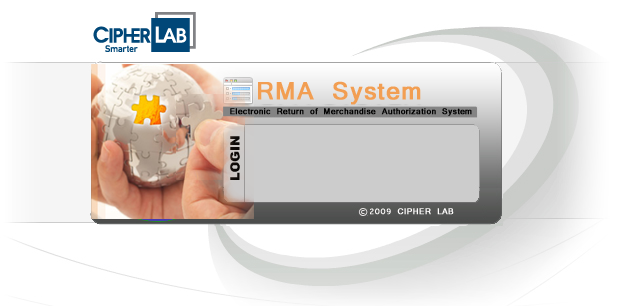
<style>
.page{position:relative;width:619px;height:306px;background:#ffffff}
.page>*{position:absolute;margin:0}
.t1{font:36px "Vrinda";letter-spacing:0.025em;color:#f29e52;font-weight:bold}
.t2{font:12px "Vrinda";letter-spacing:0.025em;color:#030303;font-weight:bold}
.t3{font:12px "Vrinda";letter-spacing:0.025em;color:#fefcfc;font-weight:bold}
</style>
<div class="page">
<p class="t1" style="left:258px;top:81px;width:163px;height:24px">RMA System</p>
<p class="t2" style="left:230px;top:108px;width:242px;height:8px">Electronic Return of Merchandise Authorization System</p>
<p class="t3" style="left:370px;top:208px;width:84px;height:7px">2009 CIPHER LAB</p>
</div>
